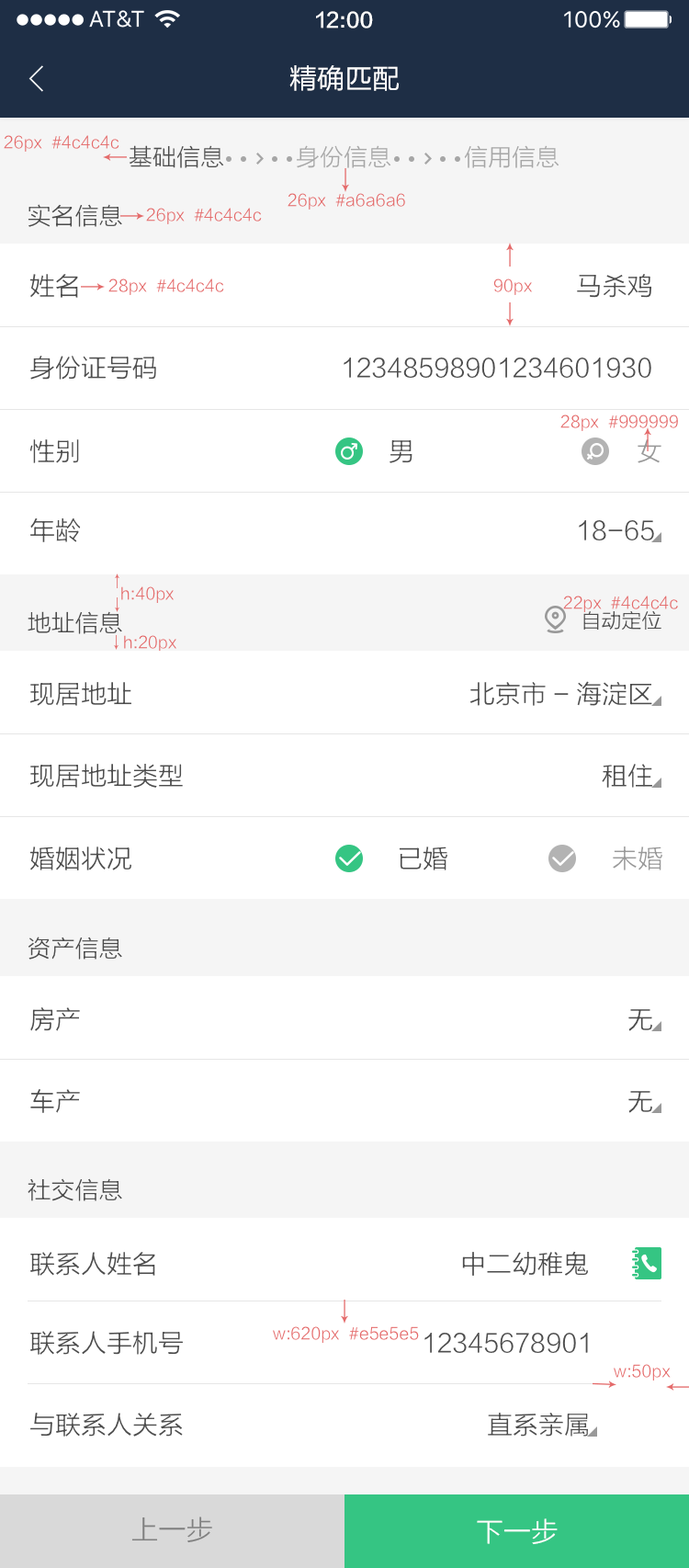
<style>
.page{position:relative;width:689px;height:1568px;background:#ffffff}
.page>*{position:absolute;margin:0}
.t1{font:20.2px "FZLTZHK--GBK1-0";color:#ffffff}
.t2{font:27.6px "FZLTHJW--GB1-0";color:#ffffff}
.t3{font:16.5px "FZLTXHK";color:#e46a6a}
.t4{font:23.9px "FZLTXHK";color:#4d4d4d}
.t5{font:23.9px "FZLTXHK";color:#a6a6a6}
.t6{font:25.7px "FZLTXHK";color:#4d4d4d}
.t7{font:25.7px "FZLTXHK";color:#999999}
.t8{font:20.2px "FZLTXHK";color:#4d4d4d}
.t9{font:27.6px "FZLTXHK";color:#808080}
.t10{font:27.6px "FZLTXHK";color:#ffffff}
</style>
<div class="page">
<p class="t1" style="left:316px;top:11px;width:57px;height:17px">12:00</p>
<p class="t2" style="left:290px;top:65px;width:110px;height:26px">精确匹配</p>
<p class="t3" style="left:4px;top:135px;width:115px;height:17px">26px  #4c4c4c</p>
<p class="t4" style="left:129px;top:145px;width:95px;height:23px">基础信息</p>
<p class="t5" style="left:297px;top:145px;width:95px;height:23px">身份信息</p>
<p class="t5" style="left:464px;top:145px;width:96px;height:23px">信用信息</p>
<p class="t3" style="left:288px;top:193px;width:117px;height:17px">26px  #a6a6a6</p>
<p class="t4" style="left:28px;top:204px;width:94px;height:23px">实名信息</p>
<p class="t3" style="left:146px;top:208px;width:116px;height:16px">26px  #4c4c4c</p>
<p class="t6" style="left:29px;top:274px;width:49px;height:24px">姓名</p>
<p class="t3" style="left:108px;top:278px;width:116px;height:17px">28px  #4c4c4c</p>
<p class="t3" style="left:494px;top:278px;width:38px;height:17px">90px</p>
<p class="t6" style="left:577px;top:274px;width:75px;height:24px">马杀鸡</p>
<p class="t6" style="left:30px;top:356px;width:126px;height:24px">身份证号码</p>
<p class="t6" style="left:344px;top:358px;width:308px;height:20px">12348598901234601930</p>
<p class="t3" style="left:561px;top:415px;width:117px;height:16px">28px  #999999</p>
<p class="t6" style="left:29px;top:439px;width:50px;height:24px">性别</p>
<p class="t6" style="left:390px;top:440px;width:23px;height:23px">男</p>
<p class="t7" style="left:638px;top:439px;width:24px;height:24px">女</p>
<p class="t6" style="left:30px;top:518px;width:51px;height:24px">年龄</p>
<p class="t6" style="left:579px;top:520px;width:75px;height:20px">18-65</p>
<p class="t3" style="left:121px;top:586px;width:53px;height:17px">h:40px</p>
<p class="t3" style="left:563px;top:596px;width:115px;height:16px">22px  #4c4c4c</p>
<p class="t4" style="left:28px;top:611px;width:94px;height:23px">地址信息</p>
<p class="t8" style="left:584px;top:611px;width:78px;height:20px">自动定位</p>
<p class="t3" style="left:124px;top:635px;width:52px;height:17px">h:20px</p>
<p class="t6" style="left:30px;top:682px;width:101px;height:24px">现居地址</p>
<p class="t6" style="left:471px;top:681px;width:182px;height:25px">北京市-海淀区</p>
<p class="t6" style="left:30px;top:764px;width:153px;height:24px">现居地址类型</p>
<p class="t6" style="left:602px;top:764px;width:51px;height:24px">租住</p>
<p class="t6" style="left:29px;top:846px;width:102px;height:24px">婚姻状况</p>
<p class="t6" style="left:399px;top:846px;width:49px;height:24px">已婚</p>
<p class="t7" style="left:613px;top:846px;width:50px;height:24px">未婚</p>
<p class="t4" style="left:28px;top:937px;width:94px;height:23px">资产信息</p>
<p class="t6" style="left:30px;top:1007px;width:50px;height:24px">房产</p>
<p class="t6" style="left:629px;top:1009px;width:24px;height:22px">无</p>
<p class="t6" style="left:30px;top:1089px;width:50px;height:24px">车产</p>
<p class="t6" style="left:629px;top:1091px;width:24px;height:22px">无</p>
<p class="t4" style="left:28px;top:1178px;width:94px;height:23px">社交信息</p>
<p class="t6" style="left:30px;top:1252px;width:125px;height:24px">联系人姓名</p>
<p class="t6" style="left:462px;top:1251px;width:126px;height:25px">中二幼稚鬼</p>
<p class="t6" style="left:30px;top:1331px;width:153px;height:24px">联系人手机号</p>
<p class="t3" style="left:273px;top:1326px;width:146px;height:17px">w:620px  #e5e5e5</p>
<p class="t6" style="left:425px;top:1333px;width:163px;height:20px">12345678901</p>
<p class="t3" style="left:614px;top:1364px;width:57px;height:17px">w:50px</p>
<p class="t6" style="left:30px;top:1413px;width:153px;height:24px">与联系人关系</p>
<p class="t6" style="left:488px;top:1413px;width:100px;height:24px">直系亲属</p>
<p class="t9" style="left:131px;top:1517px;width:81px;height:26px">上一步</p>
<p class="t10" style="left:477px;top:1518px;width:81px;height:26px">下一步</p>
</div>
